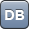
<style>
.page{position:relative;width:29px;height:29px}
.page>*{position:absolute;margin:0}
.t1{font:14px "HelveticaNeue-Bold";color:#ffffff}
</style>
<div class="page">
<p class="t1" style="left:5px;top:10px;width:20px;height:10px">DB</p>
</div>
